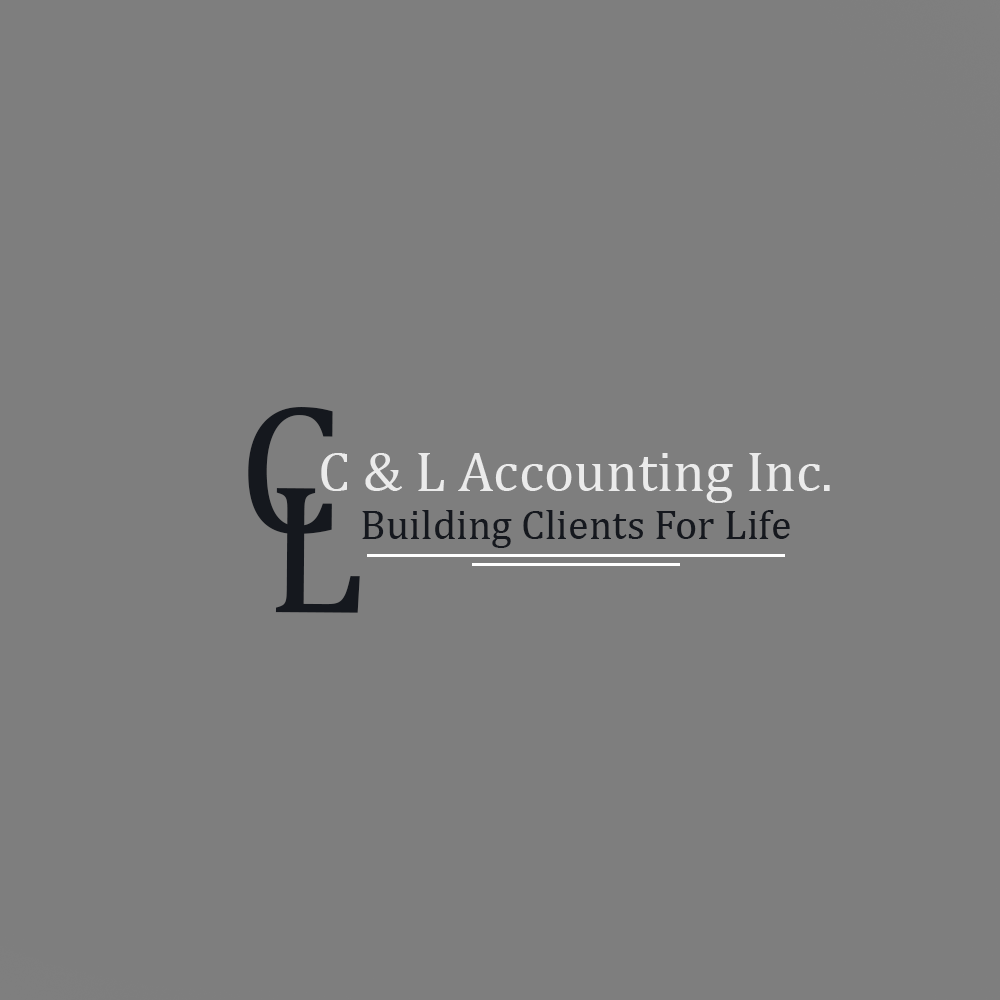
<style>
.page{position:relative;width:1000px;height:1000px;background:#7e7e7e}
.page>*{position:absolute;margin:0}
.t1{font:186.1px "Cambria";color:#15181e}
.t2{font:57.2px "Cambria";color:#ebebeb}
.t3{font:42.2px "Cambria";color:#15181e}
</style>
<div class="page">
<p class="t1" style="left:248px;top:407px;width:85px;height:127px">C</p>
<p class="t2" style="left:321px;top:453px;width:509px;height:50px">C &amp; L Accounting Inc.</p>
<p class="t1" style="left:275px;top:488px;width:85px;height:125px">L</p>
<p class="t3" style="left:362px;top:510px;width:428px;height:38px">Building Clients For Life</p>
</div>
